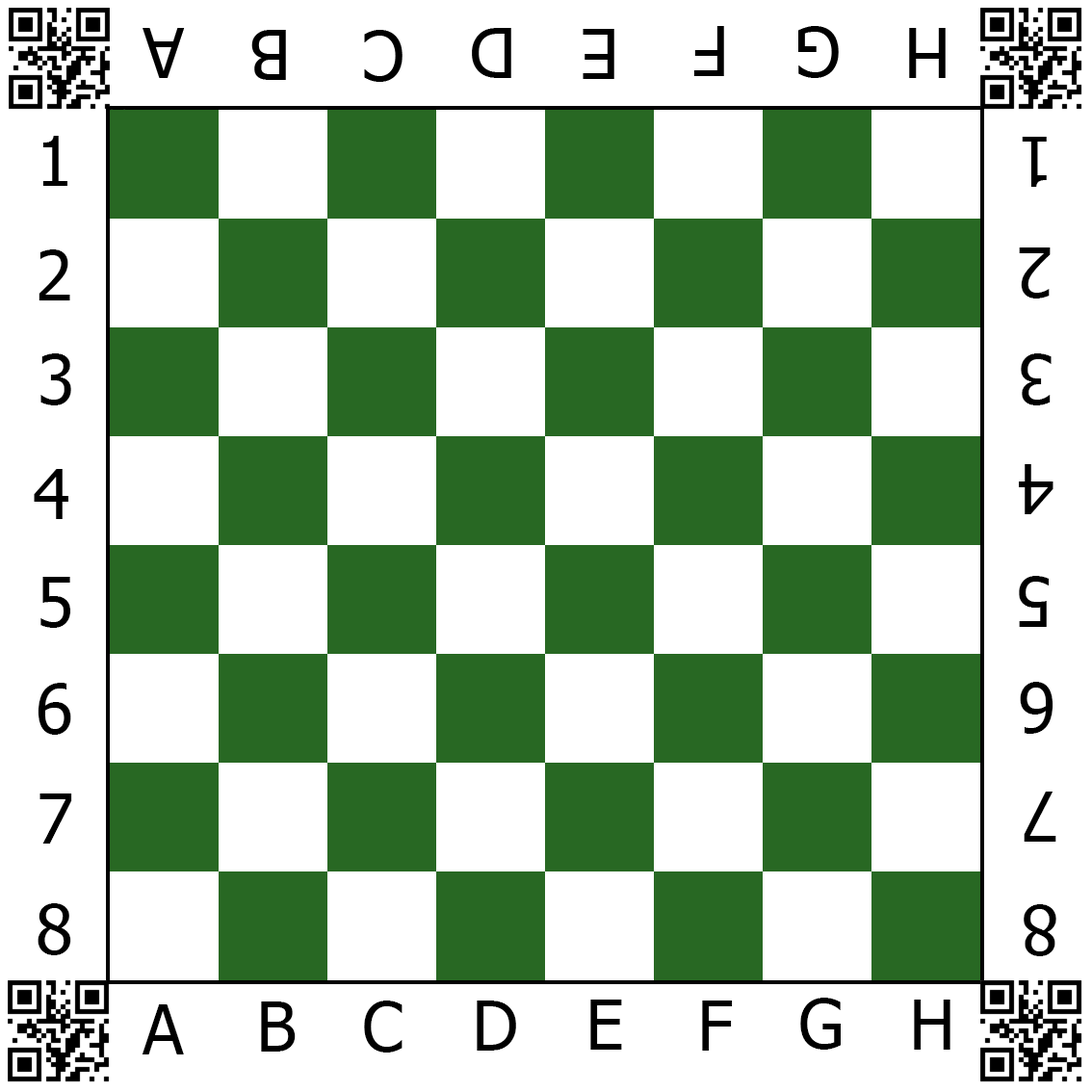
<style>
.page{position:relative;width:1092px;height:1092px;background:#ffffff}
.page>*{position:absolute;margin:0}
.t1{font:68.2px "Tahoma";color:#000000}
</style>
<div class="page">
<p class="t1" style="left:42px;top:136px;width:25px;height:50px">1</p>
<p class="t1" style="left:1022px;top:137px;width:25px;height:50px;rotate:180deg">1</p>
<p class="t1" style="left:39px;top:249px;width:31px;height:51px">2</p>
<p class="t1" style="left:1019px;top:247px;width:32px;height:52px;rotate:180deg">2</p>
<p class="t1" style="left:40px;top:353px;width:31px;height:52px">3</p>
<p class="t1" style="left:1021px;top:353px;width:31px;height:52px;rotate:180deg">3</p>
<p class="t1" style="left:34px;top:469px;width:34px;height:50px">4</p>
<p class="t1" style="left:1019px;top:464px;width:34px;height:50px;rotate:180deg">4</p>
<p class="t1" style="left:40px;top:577px;width:30px;height:51px">5</p>
<p class="t1" style="left:1019px;top:576px;width:30px;height:51px;rotate:180deg">5</p>
<p class="t1" style="left:38px;top:683px;width:33px;height:52px">6</p>
<p class="t1" style="left:1020px;top:682px;width:33px;height:52px;rotate:180deg">6</p>
<p class="t1" style="left:39px;top:793px;width:33px;height:51px">7</p>
<p class="t1" style="left:1024px;top:792px;width:32px;height:50px;rotate:180deg">7</p>
<p class="t1" style="left:38px;top:903px;width:33px;height:52px">8</p>
<p class="t1" style="left:1024px;top:904px;width:32px;height:52px;rotate:180deg">8</p>
<p class="t1" style="left:261px;top:1001px;width:35px;height:51px">B</p>
<p class="t1" style="left:364px;top:1001px;width:39px;height:52px">C</p>
<p class="t1" style="left:477px;top:1001px;width:39px;height:50px">D</p>
<p class="t1" style="left:590px;top:1000px;width:32px;height:50px">E</p>
<p class="t1" style="left:702px;top:1001px;width:31px;height:50px">F</p>
<p class="t1" style="left:800px;top:998px;width:41px;height:52px">G</p>
<p class="t1" style="left:914px;top:1000px;width:36px;height:50px">H</p>
<p class="t1" style="left:142px;top:1004px;width:42px;height:50px">A</p>
</div>
